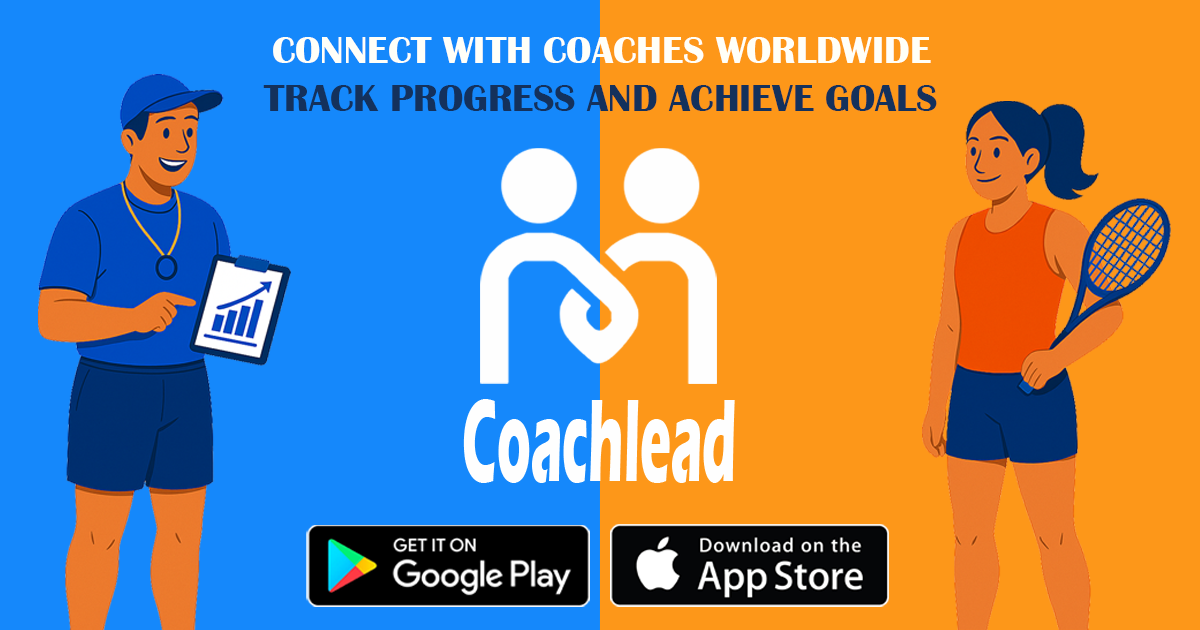
<style>
.page{position:relative;width:1200px;height:630px;background:#fd9719}
.page>*{position:absolute;margin:0}
.t1{font:39px "BritannicBold";color:#fffff8}
.t2{font:39px "BritannicBold";color:#14315c}
.t3{font:121.3px "ErasITC-Bold";color:#fefefe;scale:0.43 1}
</style>
<div class="page">
<p class="t1" style="left:273px;top:37px;width:658px;height:26px">CONNECT WITH COACHES WORLDWIDE</p>
<p class="t2" style="left:263px;top:85px;width:674px;height:26px">TRACK PROGRESS AND ACHIEVE GOALS</p>
<p class="t3" style="left:463px;top:399px;width:272px;height:84px">Coachlead</p>
</div>
